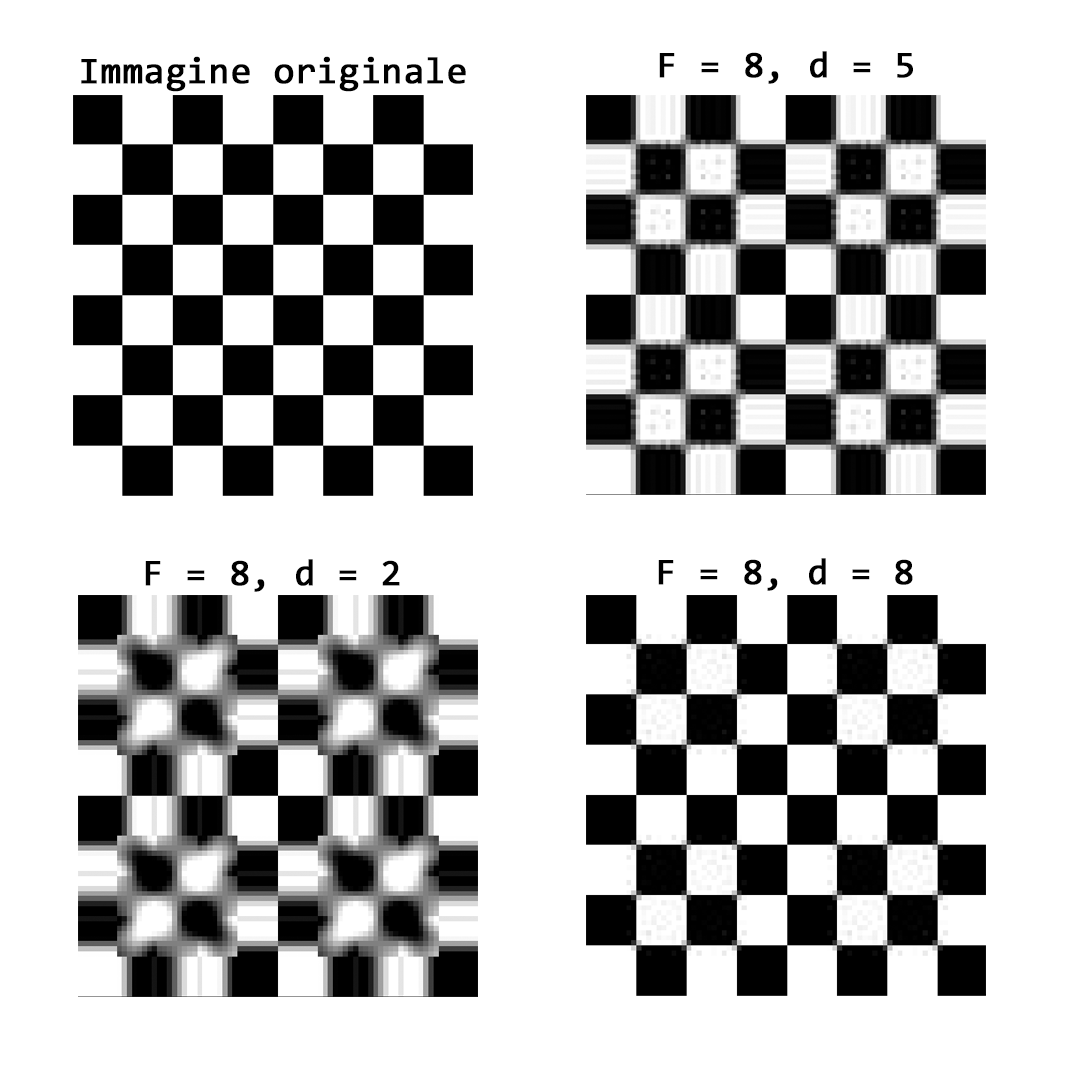
<style>
.page{position:relative;width:1080px;height:1080px;background:#ffffff}
.page>*{position:absolute;margin:0}
.t1{font:37.5px "Consolas";color:#000000;font-weight:bold}
</style>
<div class="page">
<p class="t1" style="left:659px;top:51px;width:254px;height:33px">F = 8, d = 5</p>
<p class="t1" style="left:81px;top:56px;width:385px;height:36px">Immagine originale</p>
<p class="t1" style="left:658px;top:558px;width:255px;height:33px">F = 8, d = 8</p>
<p class="t1" style="left:145px;top:559px;width:255px;height:33px">F = 8, d = 2</p>
</div>
